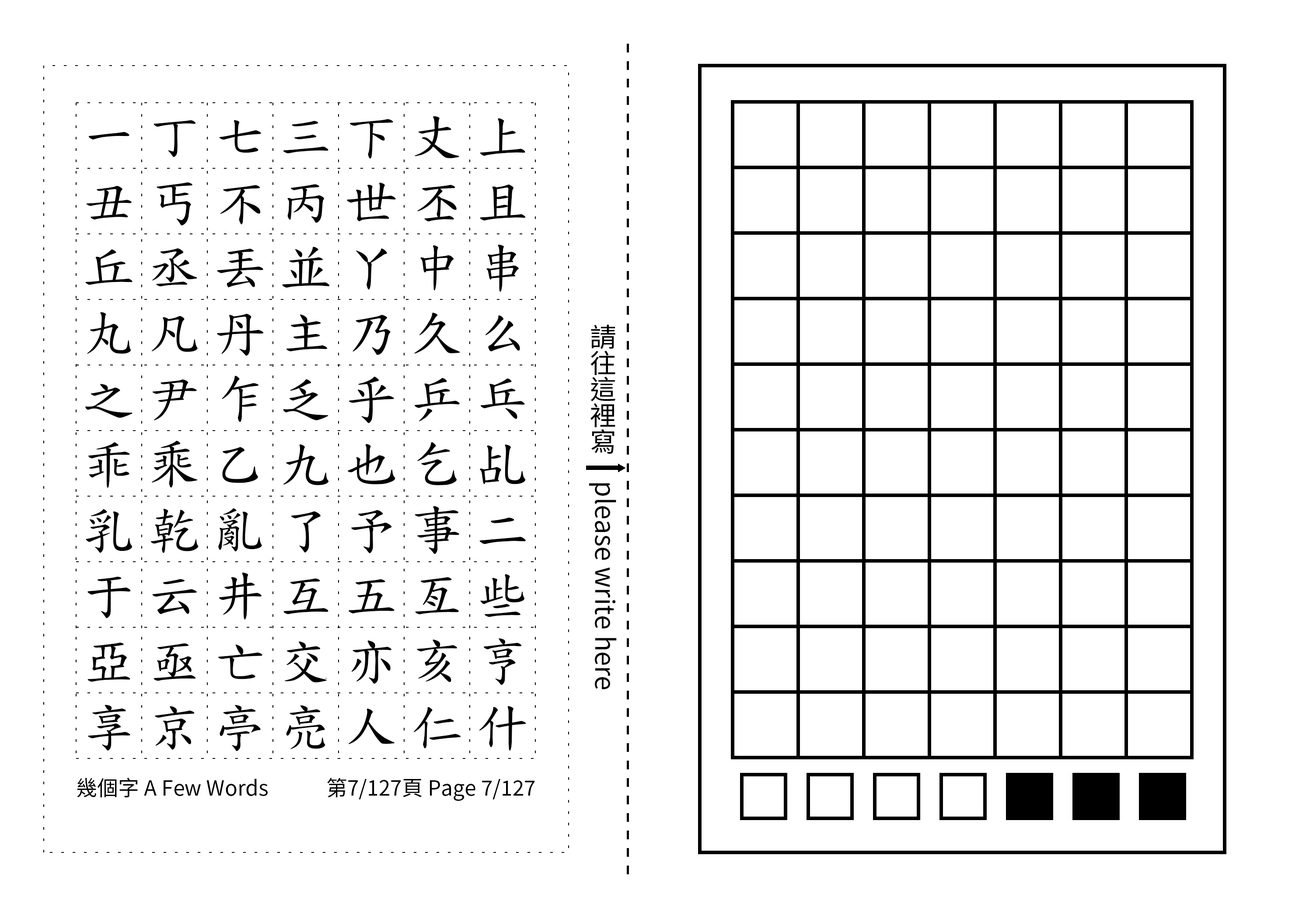
<style>
.page{position:relative;width:1299px;height:918px;background:#ffffff}
.page>*{position:absolute;margin:0}
.t1{font:52.5px/65.6px "TW-Kai-98_1";letter-spacing:0.25em;color:#000000}
.t2{font:26.2px "SourceHanSansTC-Regular";color:#000000}
.t3{font:21px "SourceHanSansTC-Regular";color:#000000}
</style>
<div class="page">
<p class="t1" style="left:85px;top:116px;width:441px;height:636px;text-align:center">一丁七三下丈上丑丐不丙世丕且丘丞丟並丫中串丸凡丹主乃久么之尹乍乏乎乒乓乖乘乙九也乞乩乳乾亂了予事二于云井互五亙些亞亟亡交亦亥亨享京亭亮人仁什</p>
<p class="t2" style="left:589px;top:324px;width:28px;height:366px;text-align:center">請往這裡寫　please write here</p>
<p class="t3" style="left:77px;top:778px;width:191px;height:20px">幾個字 A Few Words</p>
<p class="t3" style="left:327px;top:778px;width:208px;height:23px">第7/127頁 Page 7/127</p>
</div>
